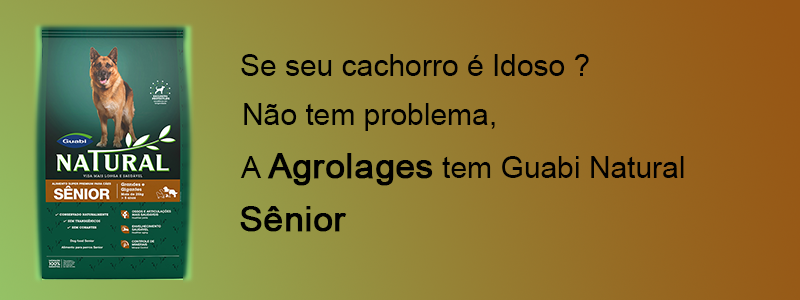
<style>
.page{position:relative;width:800px;height:300px}
.page>*{position:absolute;margin:0}
.t1{font:30px "ArialMT";color:#000000}
.t2{font:35px "ArialMT";color:#000000;font-weight:bold}
</style>
<div class="page">
<p class="t1" style="left:241px;top:54px;width:348px;height:22px">Se seu cachorro é Idoso ?</p>
<p class="t1" style="left:244px;top:103px;width:251px;height:28px">Não tem problema,</p>
<p class="t1" style="left:240px;top:153px;width:444px;height:33px">A <span class="t2">Agrolages</span> tem Guabi Natural</p>
<p class="t2" style="left:240px;top:206px;width:107px;height:26px">Sênior</p>
</div>
